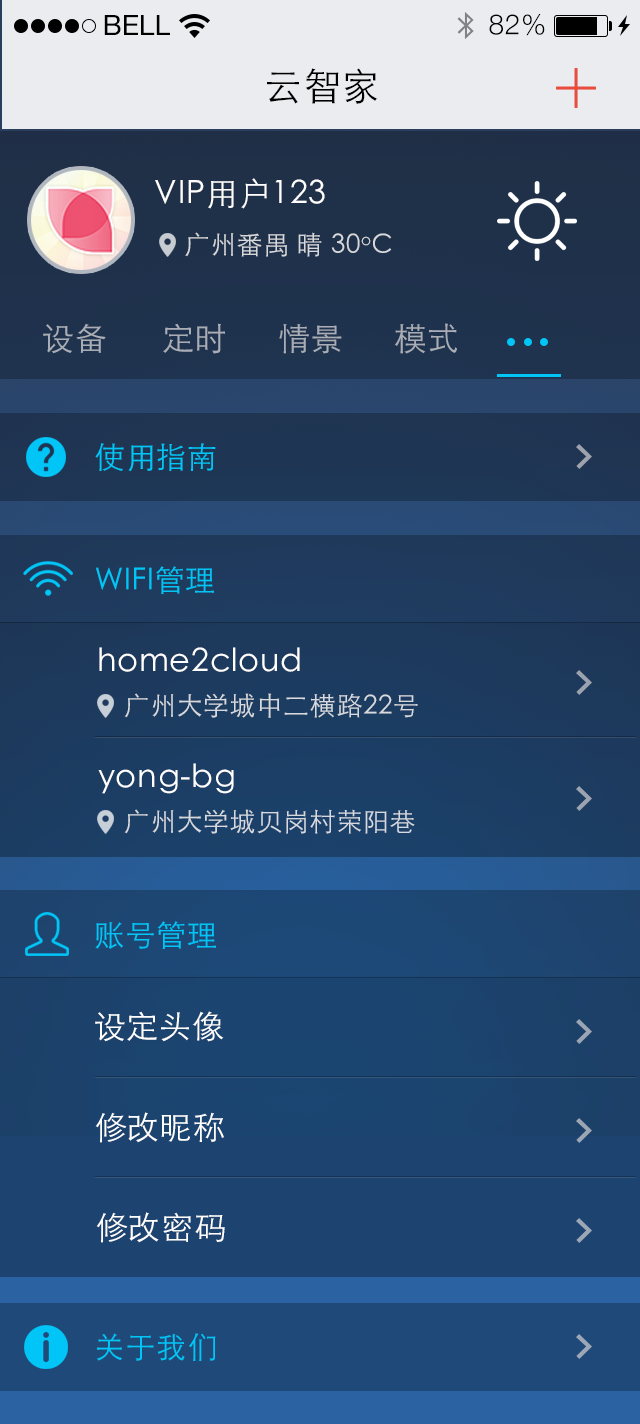
<style>
.page{position:relative;width:640px;height:1424px}
.page>*{position:absolute;margin:0}
.t1{font:28px "HelveticaNeue";color:#000000;text-transform:uppercase}
.t2{font:28px "HelveticaNeue-Light";letter-spacing:0.025em;color:#000000}
.t3{font:38px "STHeitiSC-Light";letter-spacing:0.025em;color:#000000}
.t4{font:32px "STHeitiSC-Light";letter-spacing:0.025em;color:#fffefe}
.t5{font:26px "STHeitiSC-Light";letter-spacing:0.025em;color:#d6d8db}
.t6{font:32px "STHeitiSC-Light";letter-spacing:0.025em;color:#a9adb5}
.t7{font:30px "STHeitiSC-Light";letter-spacing:0.025em;color:#01c5f6}
.t8{font:32px "STHeitiSC-Light";letter-spacing:0.025em;color:#ffffff}
.t9{font:26px "STHeitiSC-Light";letter-spacing:0.025em;color:#d6d9de}
.t10{font:26px "STHeitiSC-Light";letter-spacing:0.025em;color:#d6dae0}
</style>
<div class="page">
<p class="t1" style="left:104px;top:15px;width:66px;height:20px">Bell</p>
<p class="t2" style="left:489px;top:14px;width:56px;height:22px">82%</p>
<p class="t3" style="left:267px;top:68px;width:111px;height:36px">云智家</p>
<p class="t4" style="left:155px;top:178px;width:170px;height:31px">VIP用户123</p>
<p class="t5" style="left:185px;top:232px;width:207px;height:25px">广州番禺 晴 30oC</p>
<p class="t6" style="left:43px;top:323px;width:63px;height:31px">设备</p>
<p class="t6" style="left:163px;top:323px;width:62px;height:31px">定时</p>
<p class="t6" style="left:279px;top:324px;width:63px;height:30px">情景</p>
<p class="t6" style="left:394px;top:323px;width:63px;height:31px">模式</p>
<p class="t7" style="left:95px;top:443px;width:121px;height:29px">使用指南</p>
<p class="t7" style="left:96px;top:566px;width:118px;height:28px">WIFI管理</p>
<p class="t8" style="left:99px;top:647px;width:201px;height:25px">home2cloud</p>
<p class="t9" style="left:124px;top:693px;width:294px;height:25px">广州大学城中二横路22号</p>
<p class="t8" style="left:98px;top:763px;width:136px;height:31px">yong-bg</p>
<p class="t10" style="left:124px;top:809px;width:291px;height:25px">广州大学城贝岗村荣阳巷</p>
<p class="t7" style="left:95px;top:921px;width:121px;height:28px">账号管理</p>
<p class="t8" style="left:95px;top:1011px;width:129px;height:31px">设定头像</p>
<p class="t8" style="left:95px;top:1112px;width:129px;height:31px">修改昵称</p>
<p class="t8" style="left:96px;top:1212px;width:129px;height:31px">修改密码</p>
<p class="t7" style="left:96px;top:1333px;width:120px;height:28px">关于我们</p>
</div>
